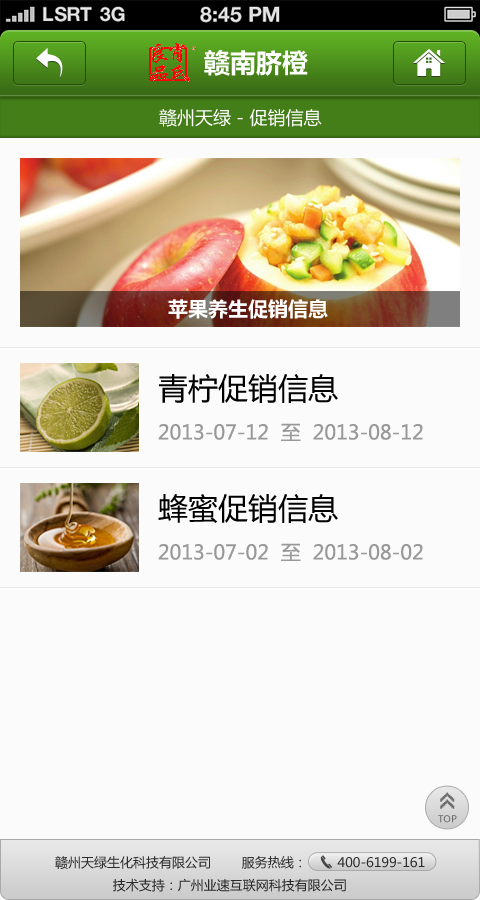
<style>
.page{position:relative;width:480px;height:900px;background:#fbfbfb}
.page>*{position:absolute;margin:0}
.t1{font:26px "MicrosoftYaHeiBold";color:#ffffff}
.t2{font:18px "MicrosoftYaHei";color:#ffffff}
.t3{font:20px "MicrosoftYaHeiBold";color:#ffffff}
.t4{font:30px "MicrosoftYaHei";color:#000000}
.t5{font:20px "MicrosoftYaHei";color:#999999}
.t6{font:26px "8514oem";letter-spacing:-0.2em;color:#6f6f6f;font-weight:bold}
.t7{font:9.3px "MicrosoftYaHei";color:#686868}
.t8{font:13px "MicrosoftYaHei";color:#2c2c2c}
</style>
<div class="page">
<p class="t1" style="left:204px;top:50px;width:104px;height:26px">赣南脐橙</p>
<p class="t2" style="left:159px;top:108px;width:163px;height:19px">赣州天绿 - 促销信息</p>
<p class="t3" style="left:168px;top:299px;width:160px;height:20px">苹果养生促销信息</p>
<p class="t4" style="left:159px;top:374px;width:179px;height:29px">青柠促销信息</p>
<p class="t5" style="left:158px;top:423px;width:265px;height:18px">2013-07-12  至  2013-08-12</p>
<p class="t4" style="left:158px;top:494px;width:180px;height:29px">蜂蜜促销信息</p>
<p class="t5" style="left:158px;top:543px;width:265px;height:18px">2013-07-02  至  2013-08-02</p>
<p class="t6" style="left:440px;top:792px;width:15px;height:17px;rotate:-90deg">&gt;&gt;</p>
<p class="t7" style="left:438px;top:815px;width:19px;height:8px">TOP</p>
<p class="t8" style="left:55px;top:856px;width:370px;height:36px">赣州天绿生化科技有限公司        服务热线：        400-6199-161<br>               技术支持：广州业速互联网科技有限公司</p>
</div>
